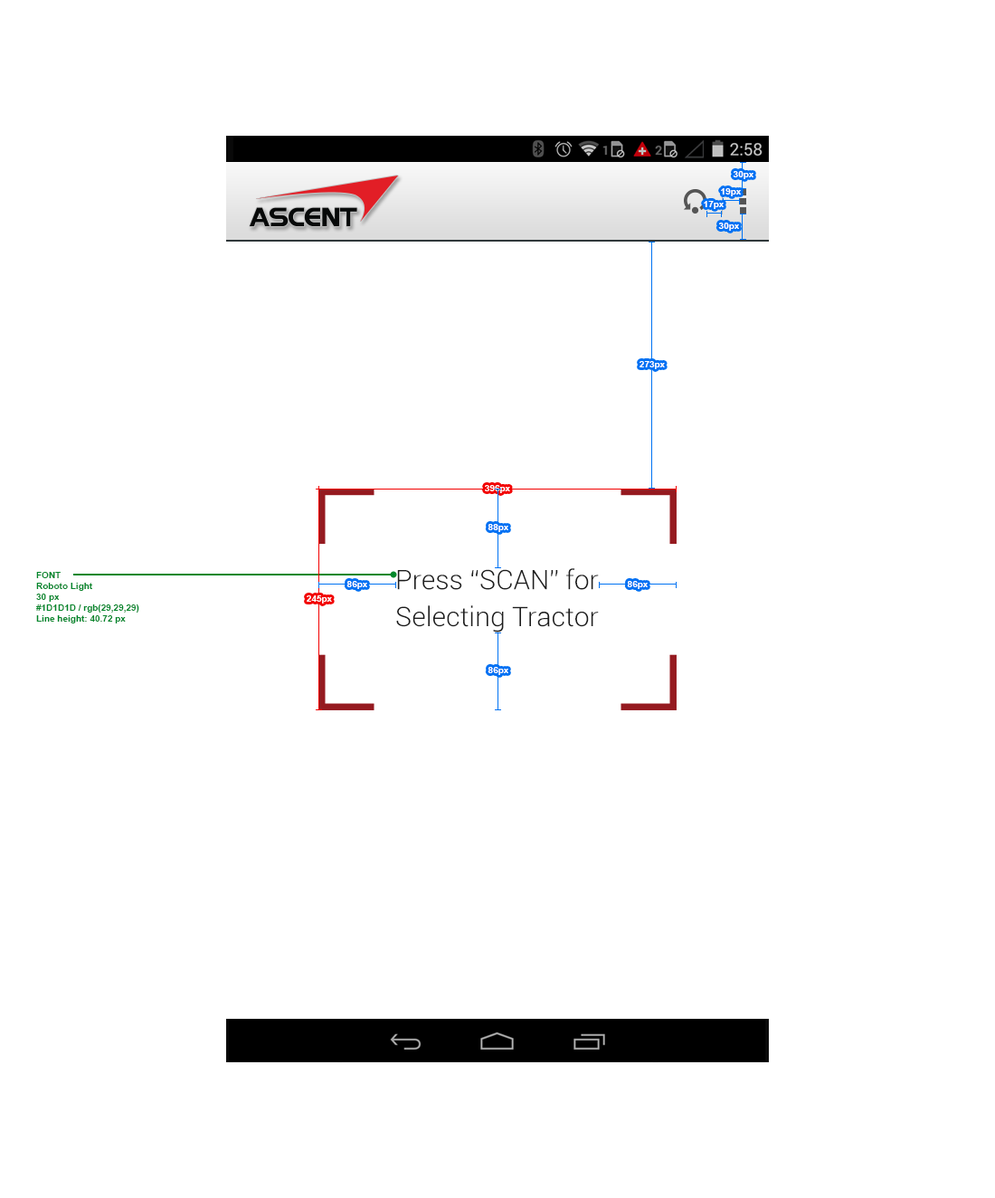
<style>
.page{position:relative;width:995px;height:1198px;background:#ffffff}
.page>*{position:absolute;margin:0}
.t1{font:9px "Arial-BoldMT";color:#ffffff}
.t2{font:27.1px/36.8px "Roboto-Light";color:#1d1d1d}
.t3{font:9px "Arial-BoldMT";color:#00872b}
</style>
<div class="page">
<p class="t1" style="left:733px;top:171px;width:21px;height:8px">30px</p>
<p class="t1" style="left:721px;top:188px;width:20px;height:8px">19px</p>
<p class="t1" style="left:704px;top:201px;width:20px;height:8px">17px</p>
<p class="t1" style="left:718px;top:223px;width:21px;height:8px">30px</p>
<p class="t1" style="left:640px;top:361px;width:25px;height:8px">273px</p>
<p class="t1" style="left:485px;top:485px;width:25px;height:8px">396px</p>
<p class="t1" style="left:488px;top:524px;width:21px;height:8px">88px</p>
<p class="t2" style="left:396px;top:568px;width:203px;height:64px;text-align:center">Press “SCAN” for<br>Selecting Tractor</p>
<p class="t3" style="left:36px;top:572px;width:103px;height:51px">FONT <br>Roboto Light<br>30 px<br>#1D1D1D / rgb(29,29,29)<br>Line height: 40.72 px</p>
<p class="t1" style="left:347px;top:581px;width:20px;height:8px">86px</p>
<p class="t1" style="left:627px;top:581px;width:21px;height:8px">86px</p>
<p class="t1" style="left:307px;top:595px;width:25px;height:9px">245px</p>
<p class="t1" style="left:488px;top:667px;width:21px;height:8px">86px</p>
</div>
